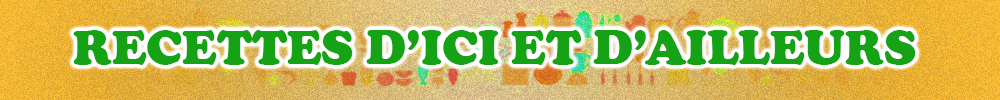
<style>
.page{position:relative;width:1000px;height:100px}
.page>*{position:absolute;margin:0}
.t1{font:50px "CooperBlack";color:#15a215}
.t2{font:37.5px "CooperBlack";color:#3f3e3d}
</style>
<div class="page">
<p class="t1" style="left:73px;top:30px;width:843px;height:35px"><span class="t2">                                               </span>RECETTES D’ICI ET D’AILLEURS</p>
</div>
